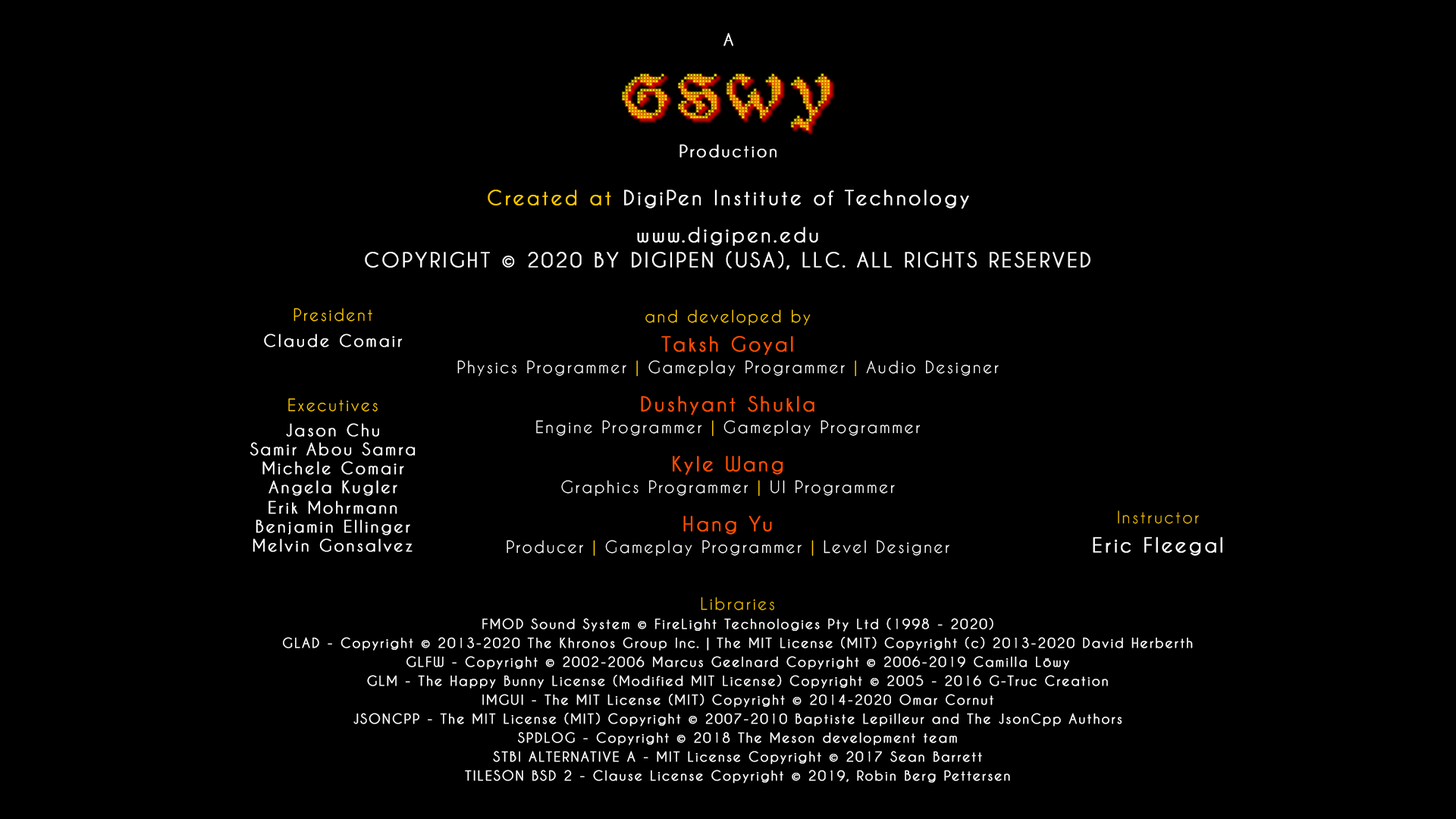
<style>
.page{position:relative;width:1456px;height:819px;background:#000000}
.page>*{position:absolute;margin:0}
.t1{font:15.8px "CaviarDreams";letter-spacing:0.12em;color:#ffffff;font-weight:bold}
.t2{font:19px "CaviarDreams";letter-spacing:0.12em;color:#ffffff;font-weight:bold}
.t3{font:19px "CaviarDreams";letter-spacing:0.12em;color:#ffcc00;font-weight:bold}
.t4{font:19px/25.3px "CaviarDreams";letter-spacing:0.12em;color:#ffffff;font-weight:bold}
.t5{font:19px/37.9px "CaviarDreams";letter-spacing:0.12em;color:#ffffff;font-weight:bold}
.t6{font:15.8px/25.3px "CaviarDreams";letter-spacing:0.12em;color:#ffffff;font-weight:bold}
.t7{font:15.8px/28.4px "CaviarDreams";letter-spacing:0.12em;color:#ffcc00}
.t8{font:15.8px/64.8px "CaviarDreams";letter-spacing:0.12em;color:#ffcc00}
.t9{font:15.8px/22.1px "CaviarDreams";letter-spacing:0.12em;color:#ffffff}
.t10{font:15.8px "CaviarDreams";letter-spacing:0.12em;color:#ffcc00}
.t11{font:19px/28.4px "CaviarDreams";letter-spacing:0.12em;color:#ff4f01;font-weight:bold}
.t12{font:15.8px/22.1px "CaviarDreams";letter-spacing:0.12em;color:#ffcc00}
.t13{font:19px/37.9px "CaviarDreams";letter-spacing:0.12em;color:#ff4f01;font-weight:bold}
.t14{font:15.8px/19px "CaviarDreams";letter-spacing:0.12em;color:#ffffff;font-weight:bold}
.t15{font:19px/28.4px "CaviarDreams";letter-spacing:0.12em;color:#ffffff;font-weight:bold}
.t16{font:15.8px/28.4px "CaviarDreams";letter-spacing:0.12em;color:#e9ba00}
.t17{font:12.6px/19px "CaviarDreams";letter-spacing:0.12em;color:#ffffff;font-weight:bold}
.t18{font:15.8px/19px "CaviarDreams";letter-spacing:0.12em;color:#e9ba00}
</style>
<div class="page">
<p class="t1" style="left:723px;top:33px;width:10px;height:13px">A</p>
<p class="t1" style="left:679px;top:144px;width:98px;height:14px">Production</p>
<p class="t2" style="left:488px;top:190px;width:481px;height:19px"><span class="t3">Created at</span> DigiPen Institute of Technology</p>
<p class="t4" style="left:365px;top:227px;width:725px;height:43px;text-align:center"><span class="t5">www.digipen.edu<br></span>COPYRIGHT © 2020 BY DIGIPEN (USA), LLC. ALL RIGHTS RESERVED</p>
<p class="t6" style="left:264px;top:308px;width:139px;height:129px;text-align:center"><span class="t7">President <br></span>Claude Comair<br><span class="t8">Executives<br></span>Jason Chu</p>
<p class="t9" style="left:457px;top:309px;width:542px;height:247px;text-align:center"><span class="t10">and developed by<br></span><span class="t11">Taksh Goyal<br></span>Physics Programmer <span class="t12">|</span> Gameplay Programmer <span class="t12">|</span> Audio Designer<br><span class="t13">Dushyant Shukla <br></span>Engine Programmer <span class="t12">|</span> Gameplay Programmer<br><span class="t13">Kyle Wang <br></span>Graphics Programmer <span class="t12">|</span> UI Programmer<br><span class="t13">Hang Yu<br></span>Producer <span class="t12">|</span> Gameplay Programmer <span class="t12">|</span> Level Designer</p>
<p class="t14" style="left:249px;top:442px;width:167px;height:54px;text-align:center">Samir Abou Samra<br>Michele Comair<br>Angela Kugler</p>
<p class="t14" style="left:253px;top:500px;width:160px;height:52px;text-align:center">Erik Mohrmann<br>Benjamin Ellinger<br>Melvin Gonsalvez</p>
<p class="t15" style="left:1093px;top:510px;width:129px;height:46px;text-align:center"><span class="t16">Instructor<br></span>Eric Fleegal</p>
<p class="t17" style="left:283px;top:597px;width:910px;height:186px;text-align:center"><span class="t18">Libraries<br></span>FMOD Sound System © FireLight Technologies Pty Ltd (1998 - 2020)<br>GLAD - Copyright © 2013-2020 The Khronos Group Inc. | The MIT License (MIT) Copyright (c) 2013-2020 David Herberth<br>GLFW - Copyright © 2002-2006 Marcus Geelnard Copyright © 2006-2019 Camilla Löwy<br>GLM - The Happy Bunny License (Modified MIT License) Copyright © 2005 - 2016 G-Truc Creation<br>IMGUI - The MIT License (MIT) Copyright © 2014-2020 Omar Cornut<br>JSONCPP - The MIT License (MIT) Copyright © 2007-2010 Baptiste Lepilleur and The JsonCpp Authors<br>SPDLOG - Copyright © 2018 The Meson development team<br>STBI ALTERNATIVE A - MIT License Copyright © 2017 Sean Barrett<br>TILESON BSD 2 - Clause License Copyright © 2019, Robin Berg Pettersen</p>
</div>
